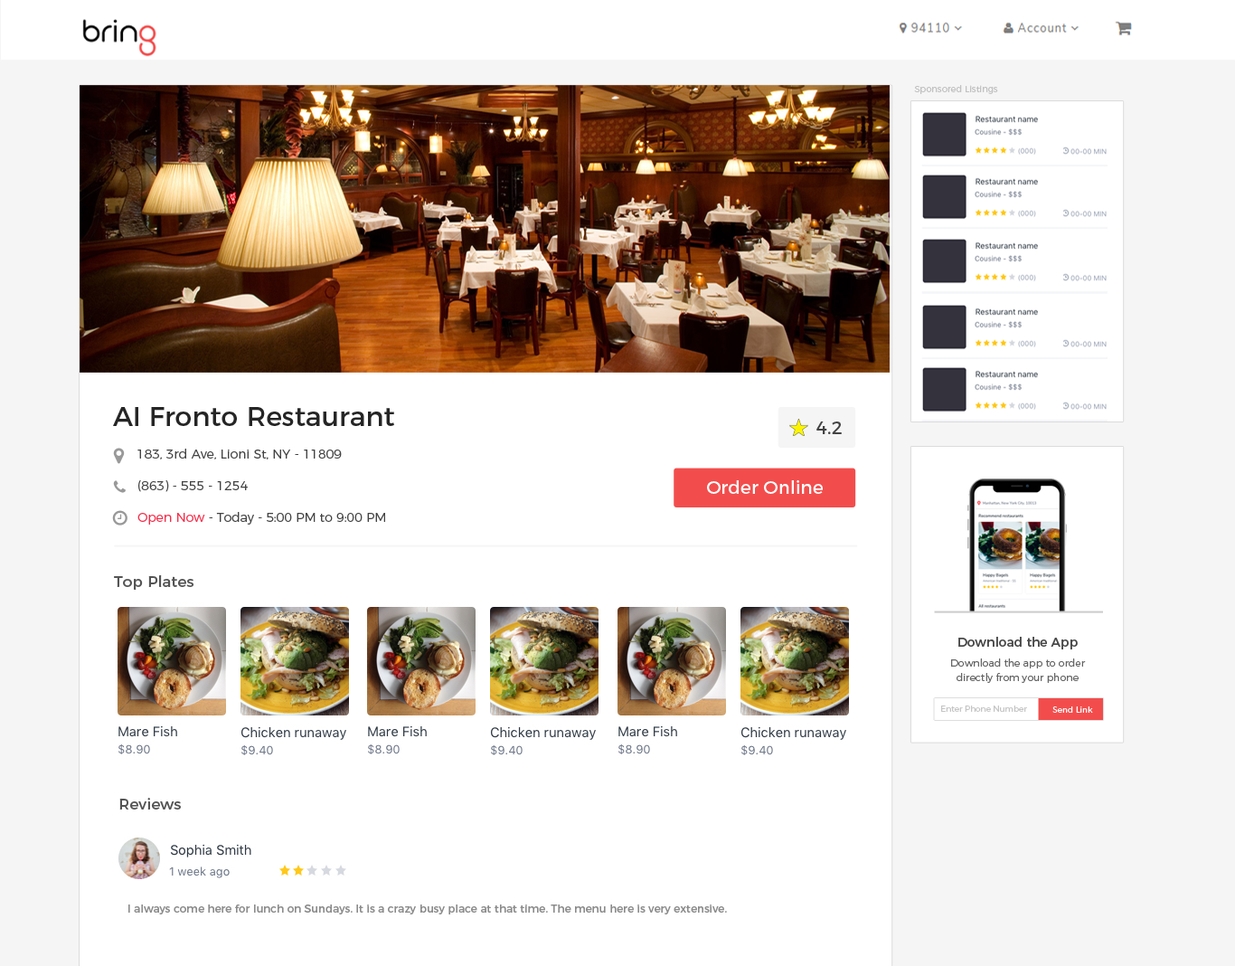
<style>
.page{position:relative;width:1235px;height:966px;background:#ffffff}
.page>*{position:absolute;margin:0}
.t1{font:9px "Montserrat-Light";color:#c1c1c1}
.t2{font:27.1px "Montserrat-Regular";color:#252525}
.t3{font:18.1px "Montserrat-Regular";color:#434343}
.t4{font:12.7px "Montserrat-Light";color:#434343}
.t5{font:18.1px "Montserrat-Regular";color:#ffffff}
.t6{font:12.7px "Montserrat-Light";color:#f42e4a}
.t7{font:15.4px "Montserrat-Regular";color:#545454}
.t8{font:12.7px "Montserrat-Regular";color:#484848}
.t9{font:10px/14.7px "Montserrat-Light";color:#666666}
.t10{font:8.2px "Montserrat-Light";color:#c5c5c5}
.t11{font:8.2px "Montserrat-Light";color:#fefefe}
.t12{font:10.8px "Montserrat-Regular";color:#8b8b8b}
</style>
<div class="page">
<p class="t1" style="left:914px;top:85px;width:84px;height:9px">Sponsored Listings</p>
<p class="t2" style="left:113px;top:407px;width:281px;height:19px">AI Fronto Restaurant</p>
<p class="t3" style="left:816px;top:421px;width:26px;height:13px">4.2</p>
<p class="t4" style="left:137px;top:448px;width:205px;height:11px">183, 3rd Ave, Lioni St, NY - 11809</p>
<p class="t4" style="left:138px;top:480px;width:110px;height:12px">(863) - 555 - 1254</p>
<p class="t5" style="left:707px;top:480px;width:116px;height:14px">Order Online</p>
<p class="t4" style="left:137px;top:512px;width:248px;height:12px"><span class="t6">Open Now </span>- Today - 5:00 PM to 9:00 PM</p>
<p class="t7" style="left:114px;top:575px;width:80px;height:14px">Top Plates</p>
<p class="t8" style="left:958px;top:636px;width:120px;height:13px">Download the App</p>
<p class="t9" style="left:951px;top:658px;width:135px;height:25px;text-align:center">Download the app to order<br>directly from your phone</p>
<p class="t10" style="left:941px;top:705px;width:86px;height:7px">Enter Phone Number</p>
<p class="t11" style="left:1052px;top:706px;width:41px;height:6px">Send Link</p>
<p class="t7" style="left:119px;top:797px;width:62px;height:12px">Reviews</p>
<p class="t12" style="left:128px;top:904px;width:599px;height:10px">I always come here for lunch on Sundays. It is a crazy busy place at that time. The menu here is very extensive.</p>
</div>
